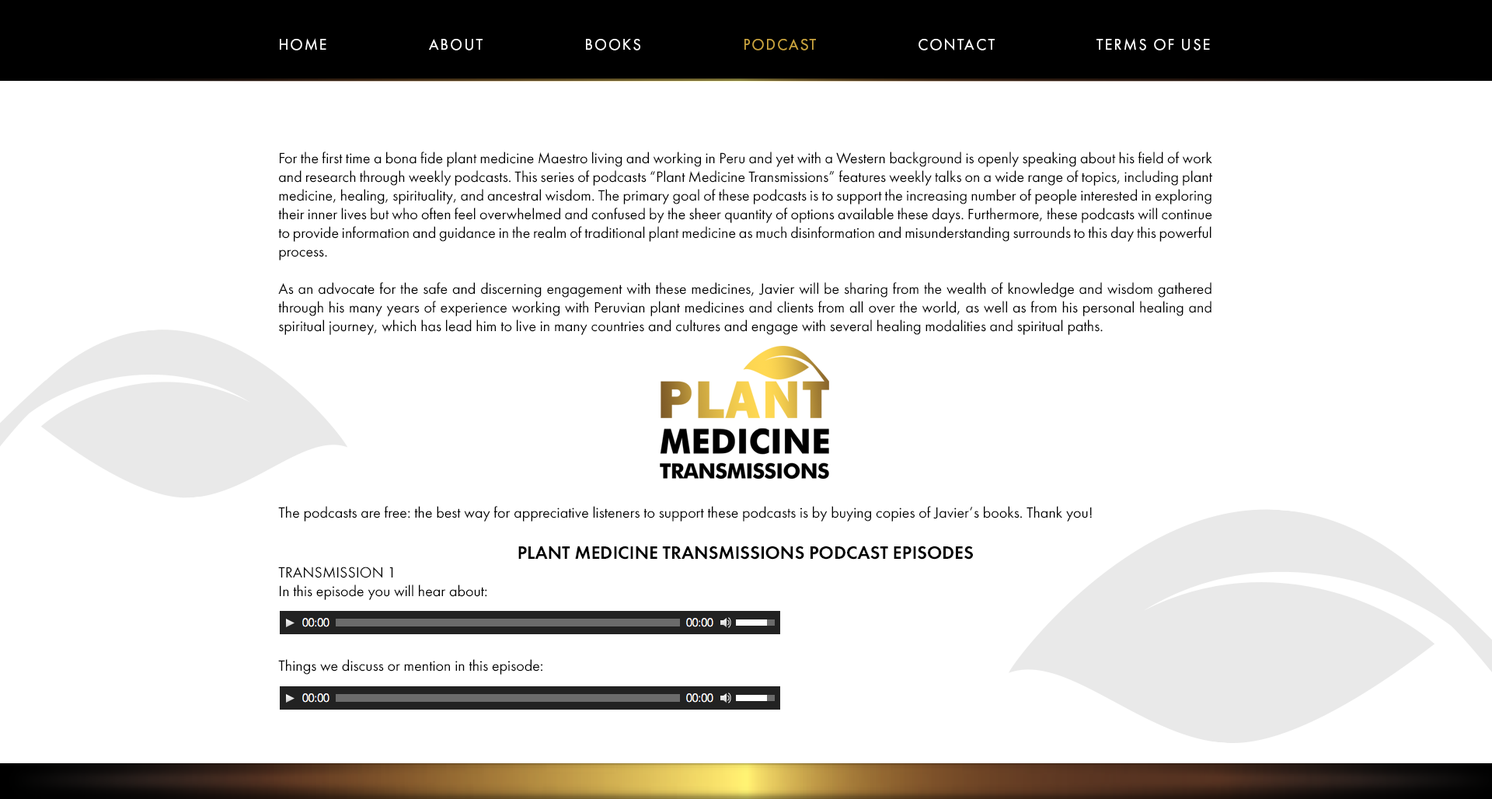
<style>
.page{position:relative;width:1492px;height:799px;background:#ffffff}
.page>*{position:absolute;margin:0}
.t1{font:15.5px "FuturaBookC";letter-spacing:0.107em;color:#ffffff;text-transform:uppercase}
.t2{font:15.5px "FuturaBookC";letter-spacing:0.107em;color:#c9a33f;text-transform:uppercase}
.t3{font:15.5px "FuturaBookC";color:#000000}
.t4{font:18.7px "FuturaDemiC";color:#000000;text-transform:uppercase}
</style>
<div class="page">
<p class="t1" style="left:280px;top:38px;width:930px;height:13px">Home                   About                   Books                   <span class="t2">Podcast </span>                  Contact                   Terms of Use</p>
<p class="t3" style="left:278px;top:152px;width:935px;height:523px;text-align:justify">For the first time a bona fide plant medicine Maestro living and working in Peru and yet with a Western background is openly speaking about his field of work and research through weekly podcasts. This series of podcasts “Plant Medicine Transmissions” features weekly talks on a wide range of topics, including plant medicine, healing, spirituality, and ancestral wisdom. The primary goal of these podcasts is to support the increasing number of people interested in exploring their inner lives but who often feel overwhelmed and confused by the sheer quantity of options available these days. Furthermore, these podcasts will continue to provide information and guidance in the realm of traditional plant medicine as much disinformation and misunderstanding surrounds to this day this powerful process.<br><br>As an advocate for the safe and discerning engagement with these medicines, Javier will be sharing from the wealth of knowledge and wisdom gathered through his many years of experience working with Peruvian plant medicines and clients from all over the world, as well as from his personal healing and spiritual journey, which has lead him to live in many countries and cultures and engage with several healing modalities and spiritual paths.<br><br><br><br><br><br><br><br><br><br>The podcasts are free: the best way for appreciative listeners to support these podcasts is by buying copies of Javier’s books. Thank you!<br><br><span class="t4">Plant Medicine Transmissions Podcast Episodes<br></span>TRANSMISSION 1<br>In this episode you will hear about:<br><br><br><br>Things we discuss or mention in this episode:</p>
</div>
